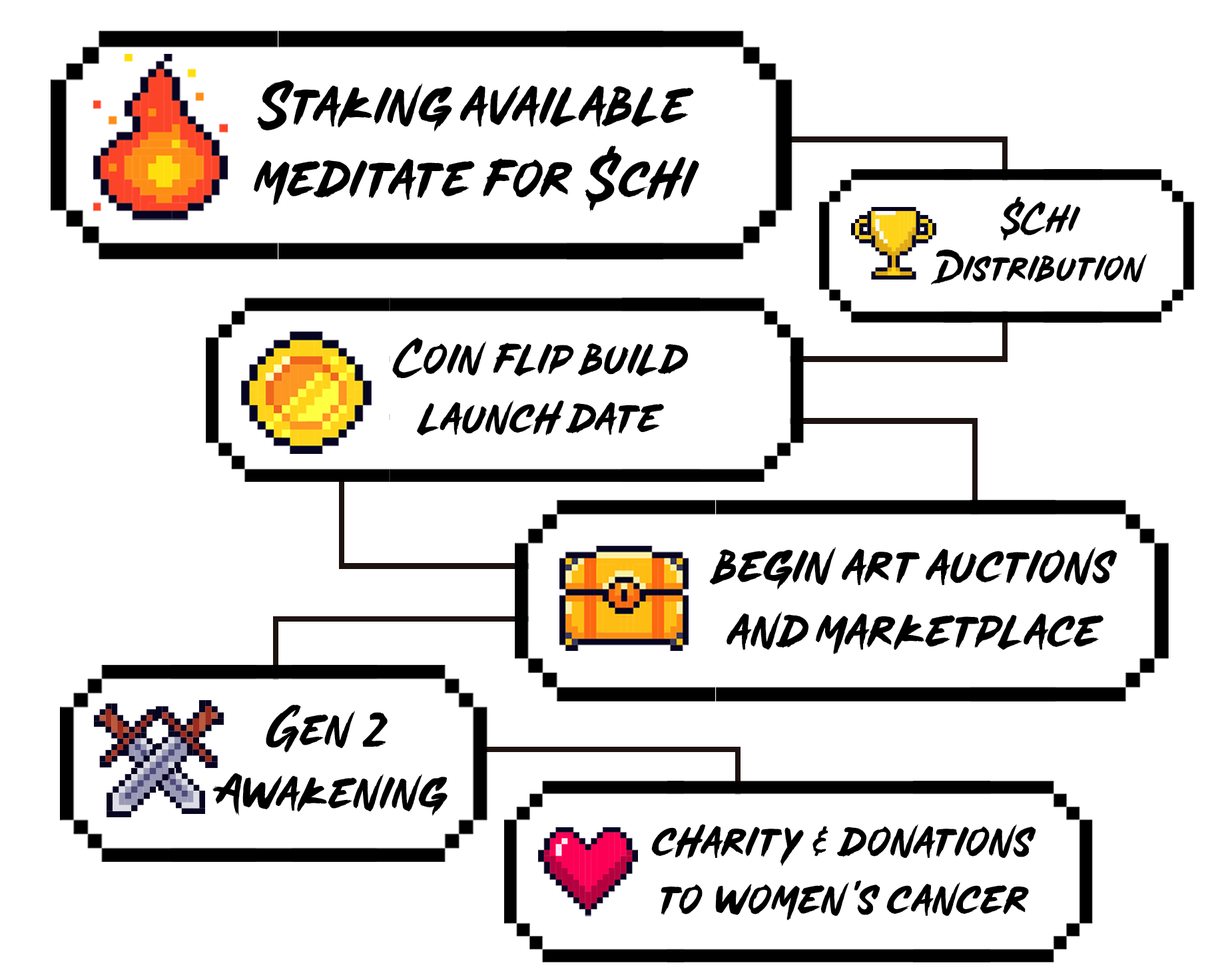
<style>
.page{position:relative;width:1218px;height:979px;background:#ffffff}
.page>*{position:absolute;margin:0}
.t1{font:61.4px "MADESoulmazeBrush";color:#000000}
.t2{font:41.2px "MADESoulmazeBrush";color:#000000}
.t3{font:49.5px "MADESoulmazeBrush";color:#000000}
.t4{font:54.2px "MADESoulmazeBrush";color:#000000}
.t5{font:53px "MADESoulmazeBrush";color:#000000}
.t6{font:48.7px "MADESoulmazeBrush";color:#000000}
</style>
<div class="page">
<p class="t1" style="left:254px;top:80px;width:445px;height:132px;text-align:center">Staking available<br>meditate for $chi</p>
<p class="t2" style="left:930px;top:196px;width:216px;height:89px;text-align:center">$Chi<br>Distribution</p>
<p class="t3" style="left:392px;top:338px;width:296px;height:98px;text-align:center">Coin flip build<br>launch date</p>
<p class="t4" style="left:709px;top:547px;width:407px;height:107px;text-align:center">begin art auctions <br>and marketplace</p>
<p class="t5" style="left:212px;top:705px;width:235px;height:111px;text-align:center">Gen 2<br>Awakening</p>
<p class="t6" style="left:651px;top:824px;width:385px;height:97px;text-align:center">charity &amp; donations to women’s cancer</p>
</div>
